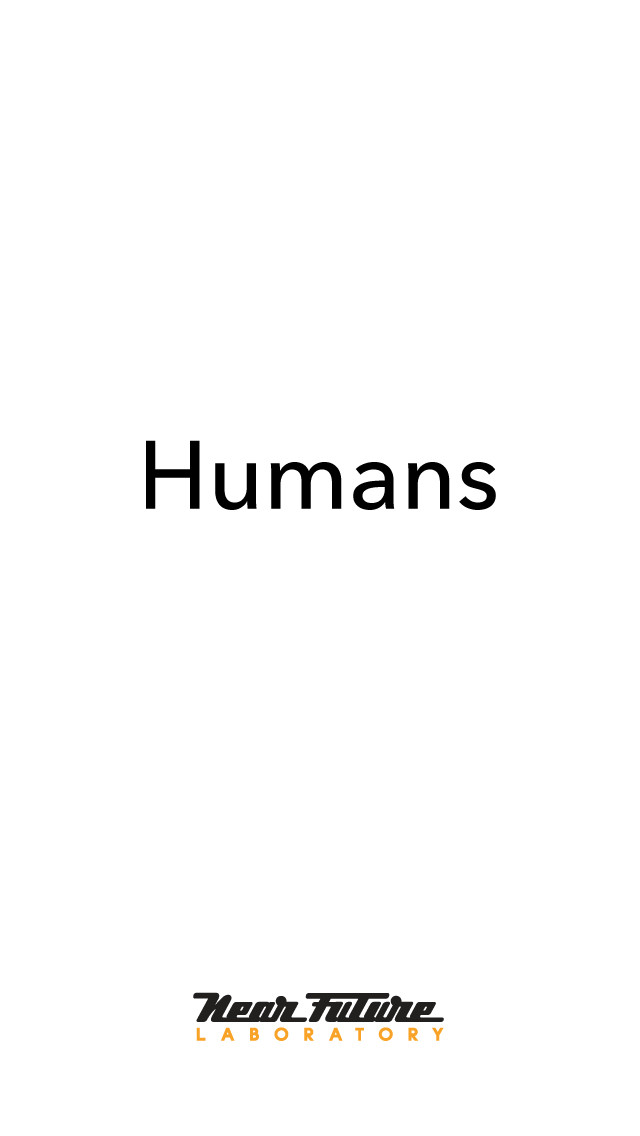
<style>
.page{position:relative;width:640px;height:1136px;background:#ffffff}
.page>*{position:absolute;margin:0}
.t1{font:96px "AvenirNext-Medium";color:#000000}
</style>
<div class="page">
<p class="t1" style="left:146px;top:440px;width:350px;height:70px">Humans</p>
</div>
